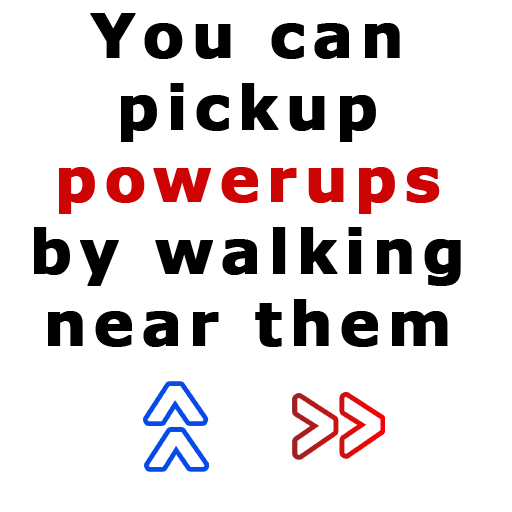
<style>
.page{position:relative;width:512px;height:512px;background:#ffffff}
.page>*{position:absolute;margin:0}
.t1{font:60px "Verdana-Bold";letter-spacing:0.1em;color:#000000;font-weight:bold}
.t2{font:60px "Verdana-Bold";letter-spacing:0.1em;color:#cd0404;font-weight:bold}
</style>
<div class="page">
<p class="t1" style="left:34px;top:13px;width:427px;height:334px;text-align:center">You can pickup <span class="t2">powerups</span> by walking near them</p>
</div>
